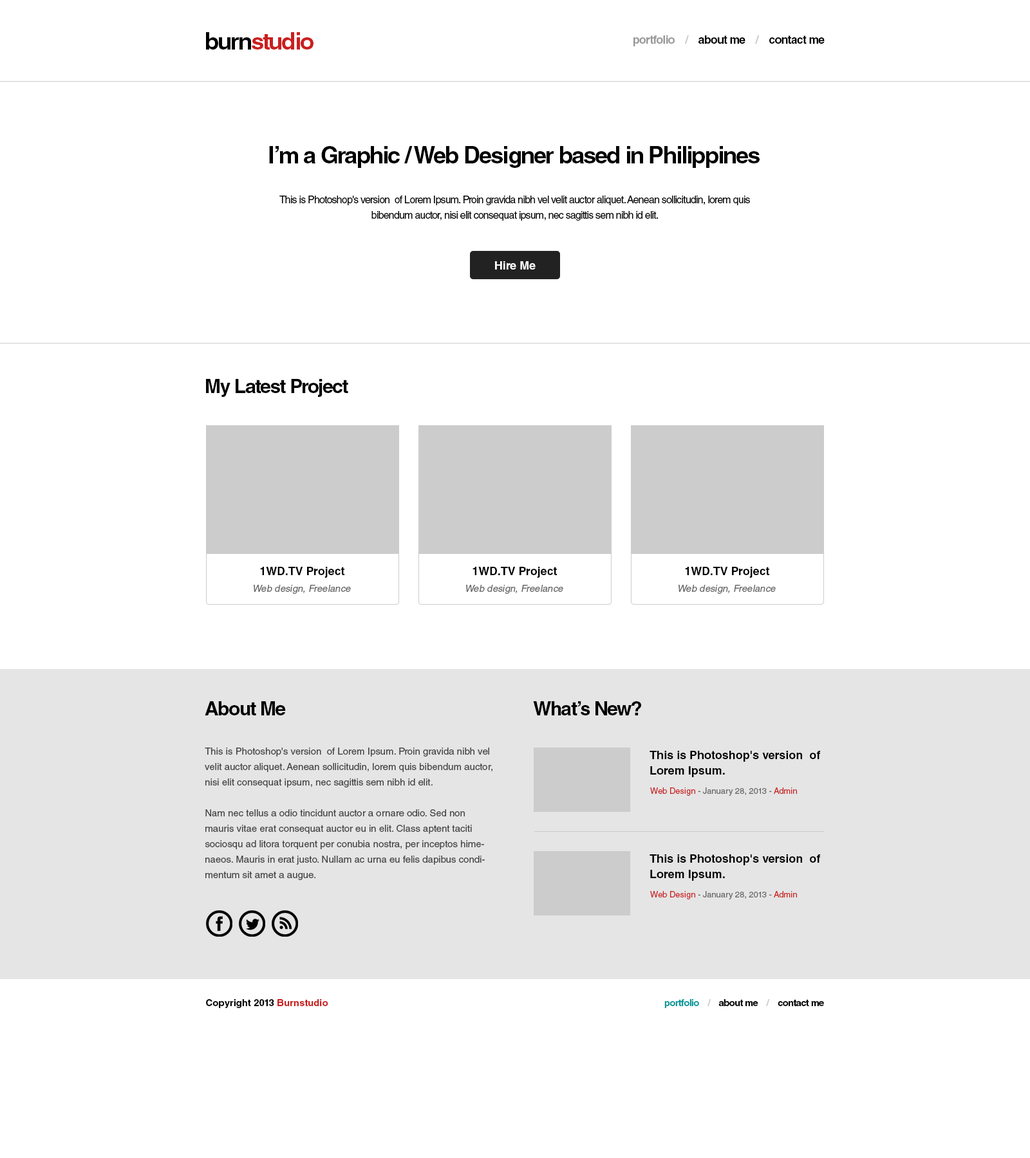
<style>
.page{position:relative;width:1030px;height:1158px;background:#ffffff}
.page>*{position:absolute;margin:0}
.t1{font:23.2px "HelveticaLTStd-Bold";letter-spacing:-0.05em;color:#ca1f1f}
.t2{font:23.2px "HelveticaLTStd-Bold";letter-spacing:-0.05em;color:#000000}
.t3{font:11.6px "HelveticaLTStd-Bold";letter-spacing:-0.05em;color:#000000}
.t4{font:11.6px "HelveticaLTStd-Bold";letter-spacing:-0.05em;color:#999999}
.t5{font:11.6px "HelveticaLTStd-Bold";letter-spacing:-0.05em;color:#cccccc}
.t6{font:10.3px/15.4px "HelveticaLTStd-Roman";letter-spacing:-0.05em;color:#000000}
.t7{font:11.6px "HelveticaLTStd-Bold";color:#ffffff}
.t8{font:19.3px "HelveticaLTStd-Bold";letter-spacing:-0.05em;color:#000000}
.t9{font:11.6px "HelveticaLTStd-Bold";color:#000000}
.t10{font:9.7px "HelveticaLTStd-Roman";color:#666666;font-style:italic}
.t11{font:9.7px/15.4px "HelveticaLTStd-Roman";color:#444444}
.t12{font:11.6px/15.4px "HelveticaLTStd-Bold";color:#000000}
.t13{font:8.4px "HelveticaLTStd-Roman";color:#666666}
.t14{font:8.4px "HelveticaLTStd-Roman";color:#ca1f1f}
.t15{font:9.7px "HelveticaLTStd-Bold";color:#000000}
.t16{font:9.7px "HelveticaLTStd-Bold";color:#ca1f1f}
.t17{font:9.7px "HelveticaLTStd-Bold";letter-spacing:-0.05em;color:#000000}
.t18{font:9.7px "HelveticaLTStd-Bold";letter-spacing:-0.05em;color:#099999}
.t19{font:9.7px "HelveticaLTStd-Bold";letter-spacing:-0.05em;color:#cccccc}
</style>
<div class="page">
<p class="t1" style="left:206px;top:32px;width:107px;height:18px"><span class="t2">burn</span>studio</p>
<p class="t3" style="left:633px;top:35px;width:191px;height:11px"><span class="t4">portfolio    </span><span class="t5">/ </span>   about me   <span class="t5"> / </span>   contact me</p>
<p class="t2" style="left:269px;top:146px;width:490px;height:22px">I’m a Graphic / Web Designer based in Philippines</p>
<p class="t6" style="left:279px;top:196px;width:471px;height:25px;text-align:center">This is Photoshop's version  of Lorem Ipsum. Proin gravida nibh vel velit auctor aliquet. Aenean sollicitudin, lorem quis bibendum auctor, nisi elit consequat ipsum, nec sagittis sem nibh id elit.</p>
<p class="t7" style="left:495px;top:261px;width:40px;height:9px">Hire Me</p>
<p class="t8" style="left:206px;top:379px;width:142px;height:18px">My Latest Project</p>
<p class="t9" style="left:260px;top:567px;width:84px;height:11px">1WD.TV Project</p>
<p class="t9" style="left:472px;top:567px;width:85px;height:11px">1WD.TV Project</p>
<p class="t9" style="left:685px;top:567px;width:84px;height:11px">1WD.TV Project</p>
<p class="t10" style="left:254px;top:585px;width:97px;height:9px">Web design, Freelance</p>
<p class="t10" style="left:466px;top:585px;width:97px;height:9px">Web design, Freelance</p>
<p class="t10" style="left:678px;top:585px;width:97px;height:9px">Web design, Freelance</p>
<p class="t8" style="left:205px;top:701px;width:81px;height:15px">About Me</p>
<p class="t8" style="left:533px;top:701px;width:108px;height:15px">What’s New?</p>
<p class="t11" style="left:205px;top:748px;width:287px;height:132px">This is Photoshop's version  of Lorem Ipsum. Proin gravida nibh vel velit auctor aliquet. Aenean sollicitudin, lorem quis bibendum auctor, nisi elit consequat ipsum, nec sagittis sem nibh id elit. <br><br>Nam nec tellus a odio tincidunt auctor a ornare odio. Sed non  mauris vitae erat consequat auctor eu in elit. Class aptent taciti sociosqu ad litora torquent per conubia nostra, per inceptos himenaeos. Mauris in erat justo. Nullam ac urna eu felis dapibus condimentum sit amet a augue.</p>
<p class="t12" style="left:649px;top:751px;width:171px;height:26px">This is Photoshop's version  of Lorem Ipsum.</p>
<p class="t13" style="left:650px;top:788px;width:147px;height:8px"><span class="t14">Web Design</span> - January 28, 2013 - <span class="t14">Admin</span></p>
<p class="t12" style="left:649px;top:855px;width:171px;height:26px">This is Photoshop's version  of Lorem Ipsum.</p>
<p class="t13" style="left:650px;top:891px;width:147px;height:9px"><span class="t14">Web Design</span> - January 28, 2013 - <span class="t14">Admin</span></p>
<p class="t15" style="left:206px;top:999px;width:122px;height:9px">Copyright 2013 <span class="t16">Burnstudio</span></p>
<p class="t17" style="left:664px;top:999px;width:160px;height:9px"><span class="t18">portfolio    </span><span class="t19">/ </span>   about me   <span class="t19"> / </span>   contact me</p>
</div>
